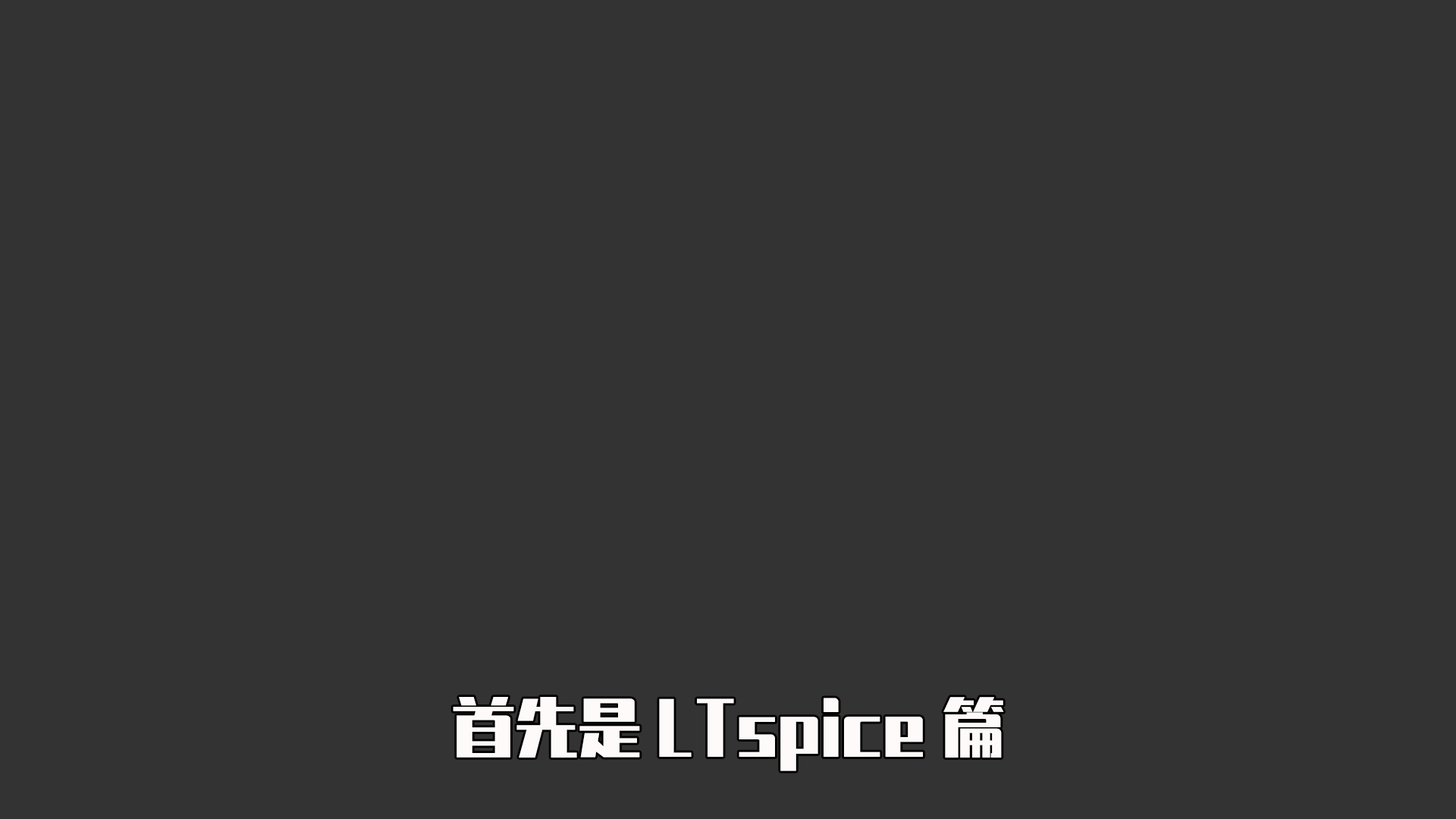
<style>
.page{position:relative;width:1456px;height:819px;background:#333333}
.page>*{position:absolute;margin:0}
.t1{font:63.2px "ZhenyanGB-Regular";color:#fefafa}
</style>
<div class="page">
<p class="t1" style="left:453px;top:697px;width:551px;height:74px">首先是LTspice篇</p>
</div>
